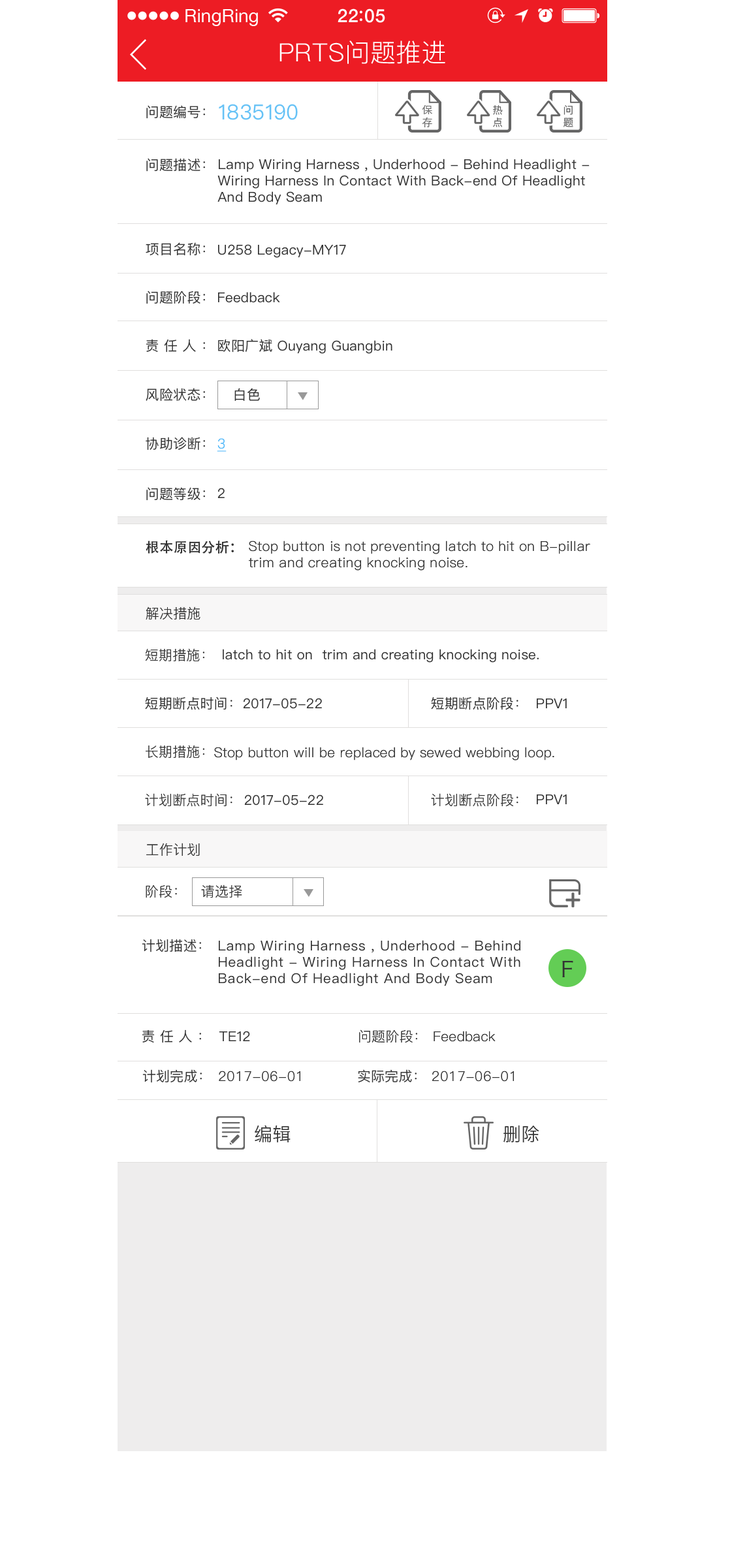
<style>
.page{position:relative;width:730px;height:1568px;background:#ffffff}
.page>*{position:absolute;margin:0}
.t1{font:18.4px "HelveticaNeue";color:#ffffff}
.t2{font:18.4px "HelveticaNeue-Medium";letter-spacing:0.03em;color:#ffffff}
.t3{font:25.2px "PingFang-SC-Regular";letter-spacing:0.01em;color:#ffffff}
.t4{font:13.7px "PingFangSC-Regular";letter-spacing:0.01em;color:#333333}
.t5{font:20.9px "PingFangSC-Regular";letter-spacing:0.01em;color:#66c2f6}
.t6{font:13.7px "PingFangSC-Regular";letter-spacing:0.35em;color:#333333}
.t7{font:13.7px "PingFang-SC-Regular";letter-spacing:0.01em;color:#47b4f9;text-decoration:underline}
.t8{font:13.7px "AdobeHeitiStd-Regular";letter-spacing:0.01em;color:#333333}
.t9{font:13.7px "PingFang-SC-Regular";letter-spacing:0.01em;color:#333333}
.t10{font:13.7px "PingFangSC-Regular";letter-spacing:0.034em;color:#333333}
.t11{font:21.1px "HiraginoSansGB-W3";letter-spacing:0.01em;color:#333333}
.t12{font:18.3px "PingFang-SC-Regular";letter-spacing:0.01em;color:#333333}
</style>
<div class="page">
<p class="t1" style="left:185px;top:9px;width:73px;height:17px">RingRing</p>
<p class="t2" style="left:337px;top:8px;width:48px;height:15px">22 05</p>
<p class="t3" style="left:279px;top:40px;width:166px;height:24px">PRTS问题推进</p>
<p class="t4" style="left:146px;top:105px;width:59px;height:14px">问题编号：</p>
<p class="t5" style="left:219px;top:104px;width:79px;height:16px">1835190</p>
<p class="t4" style="left:146px;top:158px;width:59px;height:14px">问题描述：</p>
<p class="t4" style="left:217px;top:159px;width:372px;height:46px">Lamp Wiring Harness , Underhood - Behind Headlight - Wiring Harness In Contact With Back-end Of Headlight And Body Seam</p>
<p class="t4" style="left:146px;top:242px;width:59px;height:14px">项目名称：</p>
<p class="t4" style="left:218px;top:244px;width:128px;height:14px">U258 Legacy-MY17</p>
<p class="t4" style="left:146px;top:290px;width:59px;height:14px">问题阶段：</p>
<p class="t4" style="left:218px;top:292px;width:62px;height:11px">Feedback</p>
<p class="t6" style="left:146px;top:339px;width:59px;height:14px">责任人：</p>
<p class="t4" style="left:218px;top:339px;width:174px;height:15px">欧阳广斌 Ouyang Guangbin</p>
<p class="t4" style="left:146px;top:388px;width:59px;height:13px">风险状态：</p>
<p class="t4" style="left:234px;top:388px;width:26px;height:13px">白色</p>
<p class="t4" style="left:146px;top:437px;width:59px;height:13px">协助诊断：</p>
<p class="t7" style="left:217px;top:438px;width:10px;height:14px">3</p>
<p class="t4" style="left:146px;top:487px;width:59px;height:14px">问题等级：</p>
<p class="t4" style="left:217px;top:488px;width:8px;height:10px">2</p>
<p class="t8" style="left:146px;top:540px;width:88px;height:14px">根本原因分析：</p>
<p class="t9" style="left:249px;top:541px;width:341px;height:30px">Stop button is not preventing latch to hit on B-pillar trim and creating knocking noise.</p>
<p class="t9" style="left:146px;top:606px;width:54px;height:14px">解决措施</p>
<p class="t9" style="left:145px;top:648px;width:59px;height:13px">短期措施：</p>
<p class="t4" style="left:223px;top:649px;width:316px;height:14px">latch to hit on  trim and creating knocking noise.</p>
<p class="t4" style="left:145px;top:697px;width:87px;height:13px">短期断点时间：</p>
<p class="t4" style="left:243px;top:698px;width:79px;height:11px">2017-05-22</p>
<p class="t4" style="left:431px;top:697px;width:87px;height:13px">短期斷点阶段：</p>
<p class="t4" style="left:537px;top:698px;width:30px;height:10px">PPV1</p>
<p class="t9" style="left:146px;top:745px;width:58px;height:13px">长期措施：</p>
<p class="t9" style="left:214px;top:747px;width:340px;height:13px">Stop button will be replaced by sewed webbing loop.</p>
<p class="t9" style="left:145px;top:793px;width:87px;height:14px">计划断点时间：</p>
<p class="t4" style="left:244px;top:794px;width:79px;height:12px">2017-05-22</p>
<p class="t9" style="left:431px;top:793px;width:87px;height:14px">计划断点阶段：</p>
<p class="t4" style="left:537px;top:794px;width:30px;height:10px">PPV1</p>
<p class="t9" style="left:146px;top:843px;width:54px;height:13px">工作计划</p>
<p class="t9" style="left:146px;top:885px;width:31px;height:13px">阶段：</p>
<p class="t9" style="left:201px;top:885px;width:41px;height:13px">请选择</p>
<p class="t4" style="left:142px;top:939px;width:59px;height:13px">计划描述：</p>
<p class="t10" style="left:219px;top:940px;width:301px;height:46px">Lamp Wiring Harness , Underhood - Behind Headlight - Wiring Harness In Contact With Back-end Of Headlight And Body Seam</p>
<p class="t11" style="left:562px;top:961px;width:11px;height:16px">F</p>
<p class="t6" style="left:142px;top:1029px;width:59px;height:14px">责任人：</p>
<p class="t4" style="left:219px;top:1031px;width:31px;height:10px">TE12</p>
<p class="t9" style="left:359px;top:1029px;width:58px;height:14px">问题阶段：</p>
<p class="t9" style="left:433px;top:1031px;width:62px;height:11px">Feedback</p>
<p class="t4" style="left:142px;top:1069px;width:60px;height:14px">计划完成：</p>
<p class="t9" style="left:219px;top:1071px;width:81px;height:11px">2017-06-01</p>
<p class="t4" style="left:358px;top:1069px;width:58px;height:14px">实际完成：</p>
<p class="t9" style="left:432px;top:1071px;width:82px;height:11px">2017-06-01</p>
<p class="t12" style="left:255px;top:1125px;width:35px;height:17px">编辑</p>
<p class="t12" style="left:503px;top:1125px;width:36px;height:17px">删除</p>
</div>
